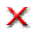
<style>
.page{position:relative;width:32px;height:32px;background:#ffffff}
.page>*{position:absolute;margin:0}
.t1{font:24px "BlairMdITCTTMedium"}
</style>
<div class="page">
<p class="t1" style="left:6px;top:7px;width:22px;height:18px">X</p>
</div>
